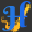
<style>
.page{position:relative;width:32px;height:32px;background:#333333}
.page>*{position:absolute;margin:0}
.t1{font:27.6px "BerkshireSwash-Regular";letter-spacing:0.02em;color:#1f6ce4;scale:1.04 1}
</style>
<div class="page">
<p class="t1" style="left:2px;top:1px;width:29px;height:30px">H</p>
</div>
